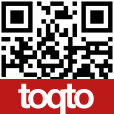
<style>
.page{position:relative;width:114px;height:114px;background:#ffffff}
.page>*{position:absolute;margin:0}
.t1{font:36px "HelveticaNeue-Bold";letter-spacing:-0.1em;color:#ffffff}
</style>
<div class="page">
<p class="t1" style="left:18px;top:83px;width:76px;height:32px">toqto</p>
</div>
